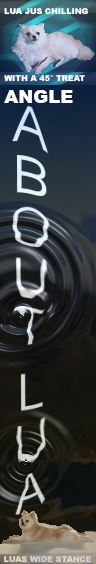
<style>
.page{position:relative;width:96px;height:564px}
.page>*{position:absolute;margin:0}
.t1{font:8px "Arial-Black";color:#ffffff}
.t2{font:18px "Arial-Black";color:#ffffff}
.t3{font:8px "Arial-Black";color:#d6d5d0}
</style>
<div class="page">
<p class="t1" style="left:4px;top:8px;width:84px;height:95px">LUA JUS CHILLING<br><br><br><br><br><br><br>WITH A 45° TREAT<br><span class="t2">ANGLE</span></p>
<p class="t3" style="left:4px;top:556px;width:88px;height:7px">LUAS WIDE STANCE</p>
</div>
